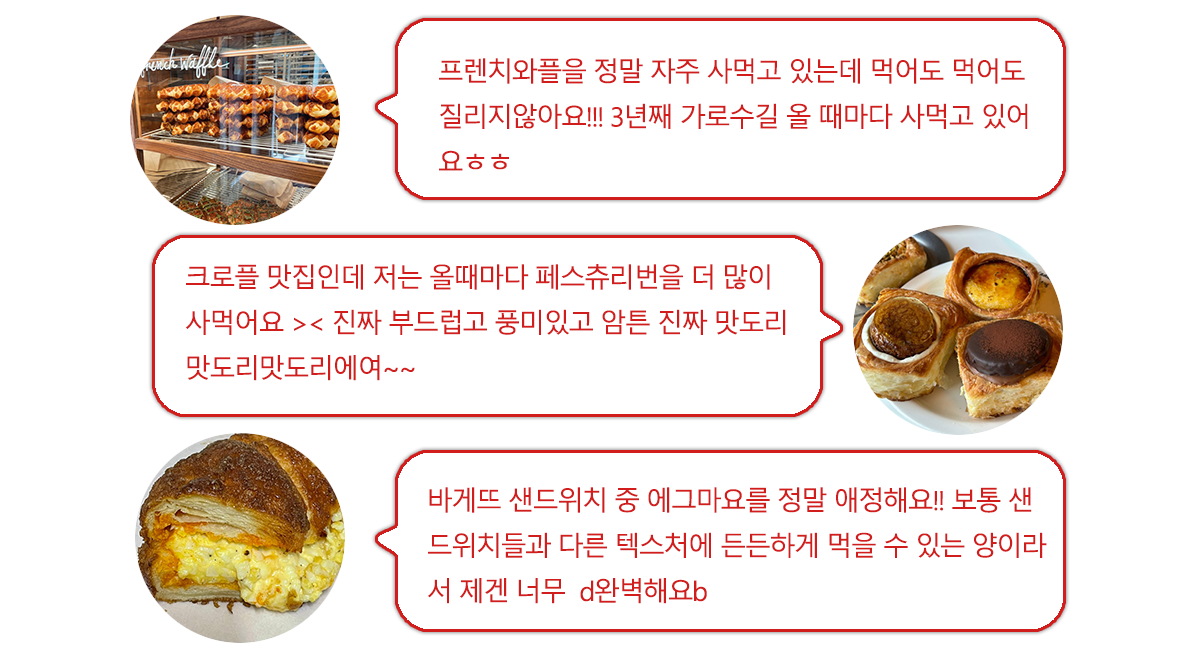
<style>
.page{position:relative;width:1200px;height:650px;background:#ffffff}
.page>*{position:absolute;margin:0}
.t1{font:26.7px "MalgunGothic";letter-spacing:-0.075em;color:#d11d1c}
</style>
<div class="page">
<p class="t1" style="left:439px;top:58px;width:589px;height:113px">프렌치와플을 정말 자주 사먹고 있는데 먹어도 먹어도<br>질리지않아요!!! 3년째 가로수길 올 때마다 사먹고 있어<br>요ㅎㅎ</p>
<p class="t1" style="left:185px;top:264px;width:601px;height:117px">크로플 맛집인데 저는 올때마다 페스츄리번을 더 많이 <br>사먹어요 &gt;&lt; 진짜 부드럽고 풍미있고 암튼 진짜 맛도리<br>맛도리맛도리에여~~</p>
<p class="t1" style="left:428px;top:487px;width:619px;height:117px">바게뜨 샌드위치 중 에그마요를 정말 애정해요!! 보통 샌<br>드위치들과 다른 텍스처에 든든하게 먹을 수 있는 양이라<br>서 제겐 너무  d완벽해요b</p>
</div>
